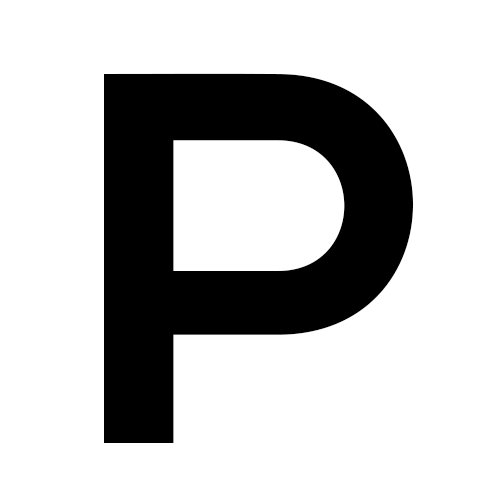
<style>
.page{position:relative;width:500px;height:500px;background:#ffffff}
.page>*{position:absolute;margin:0}
.t1{font:526.6px "NexaBold";letter-spacing:-0.02em;color:#000000}
</style>
<div class="page">
<p class="t1" style="left:104px;top:73px;width:310px;height:370px">P</p>
</div>
